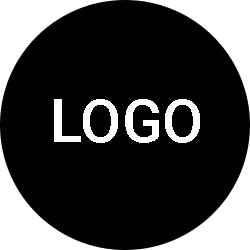
<style>
.page{position:relative;width:250px;height:250px;background:#000000}
.page>*{position:absolute;margin:0}
.t1{font:60px "Roboto-Medium";color:#ffffff}
</style>
<div class="page">
<p class="t1" style="left:54px;top:99px;width:146px;height:44px">LOGO</p>
</div>
